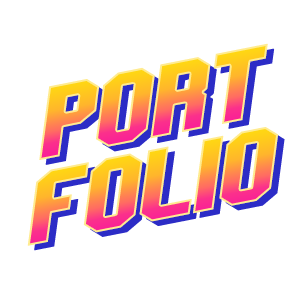
<style>
.page{position:relative;width:300px;height:300px;background:#ffffff}
.page>*{position:absolute;margin:0}
.t1{font:72px "TOP-GUN";font-weight:bold;scale:1.37 1}
.t2{font:71.9px "TOP-GUN";font-weight:bold;scale:1.37 1}
</style>
<div class="page">
<p class="t1" style="left:39px;top:43px;width:229px;height:117px;rotate:-11deg">port</p>
<p class="t2" style="left:45px;top:48px;width:230px;height:117px;rotate:-11deg">port</p>
<p class="t1" style="left:27px;top:127px;width:251px;height:119px;rotate:-11deg">folio</p>
<p class="t2" style="left:34px;top:131px;width:251px;height:120px;rotate:-11deg">folio</p>
</div>
